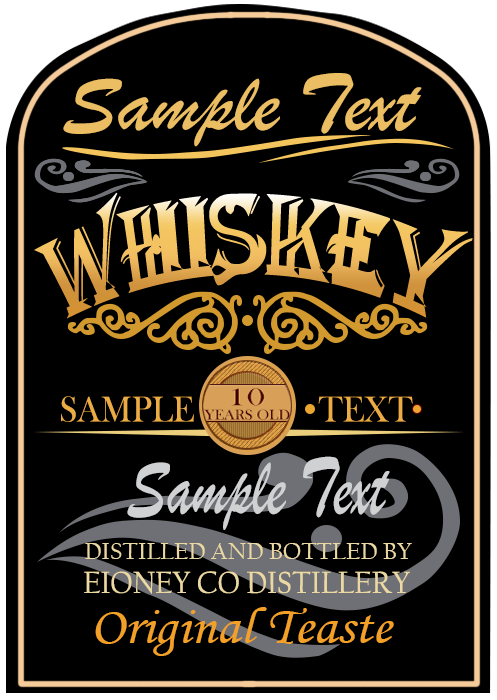
<style>
.page{position:relative;width:497px;height:700px;background:#000000}
.page>*{position:absolute;margin:0}
.t1{font:85.6px "BrushScriptMT";color:#ebbe63}
.t2{font:37.2px "BaskOldFace";color:#ebac45;scale:0.93 1}
.t3{font:85.8px "BrushScriptMT";color:#d0d1d3;scale:0.73 1}
.t4{font:24.4px "CalifornianFB-Reg";color:#ebd8a3;scale:1.03 1}
.t5{font:31.8px "CalifornianFB-Reg";color:#ebd8a3;scale:0.95 1}
.t6{font:52.9px "MonotypeCorsiva";color:#f3a028;scale:1.06 1}
</style>
<div class="page">
<p class="t1" style="left:63px;top:73px;width:359px;height:74px">Sample Text</p>
<p class="t2" style="left:61px;top:396px;width:133px;height:26px">SAMPLE</p>
<p class="t2" style="left:318px;top:396px;width:95px;height:26px">TEXT</p>
<p class="t3" style="left:127px;top:456px;width:263px;height:74px">Sample Text</p>
<p class="t4" style="left:85px;top:543px;width:327px;height:16px">DISTILLED AND BOTTLED BY</p>
<p class="t5" style="left:84px;top:571px;width:326px;height:23px">EIONEY CO DISTILLERY</p>
<p class="t6" style="left:95px;top:607px;width:299px;height:49px">Original Teaste</p>
</div>
